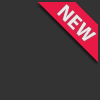
<style>
.page{position:relative;width:100px;height:100px;background:#333333}
.page>*{position:absolute;margin:0}
.t1{font:20.4px "MyriadPro-Bold";color:#e8e8e8}
</style>
<div class="page">
<p class="t1" style="left:57px;top:4px;width:40px;height:38px;rotate:45deg">NEW</p>
</div>
